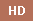
<style>
.page{position:relative;width:33px;height:21px;background:#b47059}
.page>*{position:absolute;margin:0}
.t1{font:12px "Dotum";color:#ffffff;font-weight:bold}
</style>
<div class="page">
<p class="t1" style="left:9px;top:6px;width:16px;height:9px">HD</p>
</div>
